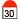
<style>
.page{position:relative;width:20px;height:21px;background:#ffffff}
.page>*{position:absolute;margin:0}
.t1{font:9px "ArialMT";color:#170603}
</style>
<div class="page">
<p class="t1" style="left:4px;top:10px;width:10px;height:7px">30</p>
</div>
